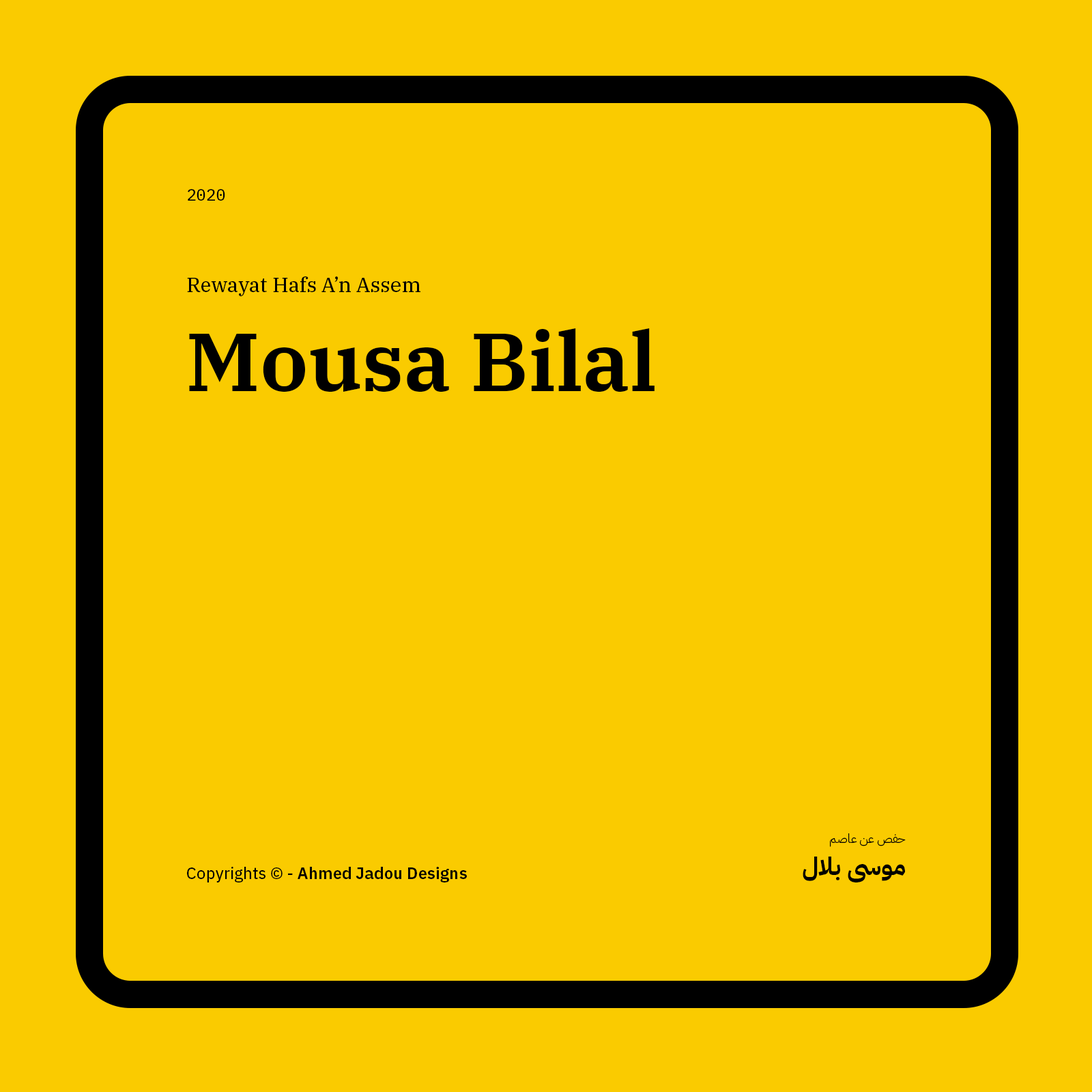
<style>
.page{position:relative;width:1092px;height:1092px;background:#facb00}
.page>*{position:absolute;margin:0}
.t1{font:16.4px "IBMPlexMono-Text";color:#000000}
.t2{font:20.5px "IBMPlexSerif-Text";color:#000000}
.t3{font:81.9px "IBMPlexSerif-SemiBold";color:#000000}
.t4{font:12.3px "IBMPlexArabic-Light";color:#000000}
.t5{font:24.6px "IBMPlexArabic-Bold";color:#000000}
.t6{font:16.4px "IBMPlexSans-SemiBold";color:#000000}
.t7{font:16.4px "IBMPlexSans-Text";color:#000000}
</style>
<div class="page">
<p class="t1" style="left:188px;top:189px;width:37px;height:12px">2020</p>
<p class="t2" style="left:187px;top:276px;width:233px;height:20px">Rewayat Hafs A’n Assem</p>
<p class="t3" style="left:189px;top:328px;width:466px;height:64px">Mousa Bilal</p>
<p class="t4" style="left:830px;top:833px;width:76px;height:14px">حفص عن عاصم</p>
<p class="t5" style="left:803px;top:857px;width:102px;height:25px">موسى بلال</p>
<p class="t6" style="left:187px;top:867px;width:280px;height:15px"><span class="t7">Copyrights © - </span>Ahmed Jadou Designs</p>
</div>
